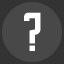
<style>
.page{position:relative;width:64px;height:64px;background:#484848}
.page>*{position:absolute;margin:0}
.t1{font:47.8px "SAOUIAnother-Bold";letter-spacing:-0.06em;color:#ffffff}
</style>
<div class="page">
<p class="t1" style="left:24px;top:12px;width:17px;height:39px">?</p>
</div>
